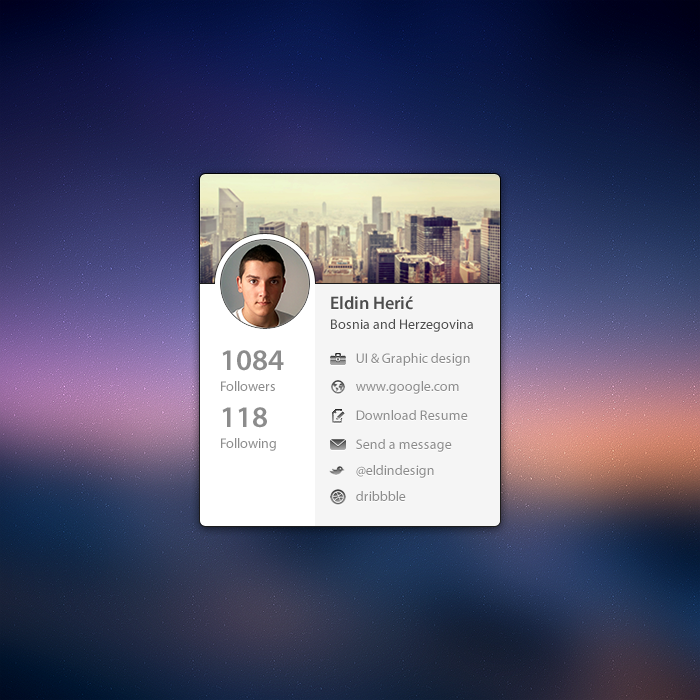
<style>
.page{position:relative;width:700px;height:700px}
.page>*{position:absolute;margin:0}
.t1{font:18px "MyriadPro-Semibold";color:#4d4d4d}
.t2{font:14px "MyriadPro-Regular";color:#4d4d4d}
.t3{font:30px "MyriadPro-Semibold";color:#8c8c8c}
.t4{font:14px "MyriadPro-Regular";color:#8c8c8c}
</style>
<div class="page">
<p class="t1" style="left:331px;top:296px;width:82px;height:14px">Eldin Herić</p>
<p class="t2" style="left:331px;top:319px;width:142px;height:13px">Bosnia and Herzegovina</p>
<p class="t3" style="left:222px;top:350px;width:62px;height:21px">1084</p>
<p class="t4" style="left:356px;top:353px;width:114px;height:13px">UI &amp; Graphic design</p>
<p class="t4" style="left:221px;top:381px;width:54px;height:10px">Followers</p>
<p class="t4" style="left:356px;top:381px;width:103px;height:13px">www.google.com</p>
<p class="t3" style="left:222px;top:407px;width:45px;height:21px">118</p>
<p class="t4" style="left:356px;top:410px;width:112px;height:10px">Download Resume</p>
<p class="t4" style="left:221px;top:438px;width:55px;height:13px">Following</p>
<p class="t4" style="left:356px;top:439px;width:96px;height:13px">Send a message</p>
<p class="t4" style="left:356px;top:465px;width:78px;height:13px">@eldindesign</p>
<p class="t4" style="left:356px;top:491px;width:50px;height:10px">dribbble</p>
</div>
